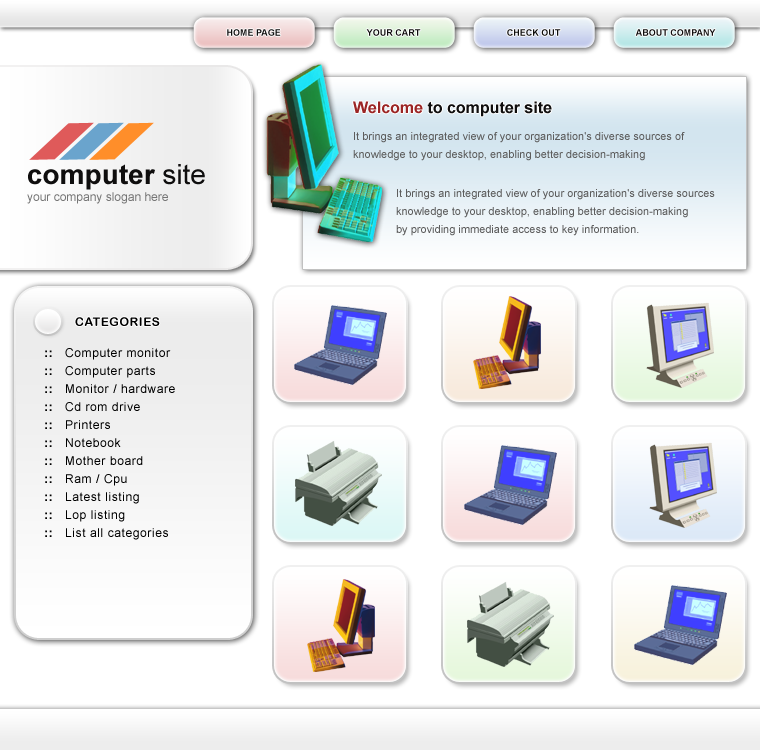
<style>
.page{position:relative;width:760px;height:750px}
.page>*{position:absolute;margin:0}
.t1{font:9px "Arial-BoldMT";color:#0f0e0e}
.t2{font:16px "Arial-BoldMT";color:#0f0e0e}
.t3{font:16px "Arial-BoldMT";color:#9b2525}
.t4{font:11px/18px "ArialMT";color:#5d5d5d}
.t5{font:28px "Arial-BoldMT";color:#0f0e0e}
.t6{font:28px "ArialMT";color:#0f0e0e}
.t7{font:12px "ArialMT";color:#757575}
.t8{font:12px "ArialRoundedMTBold";letter-spacing:0.05em;color:#000000}
.t9{font:12px/18px "ArialMT";letter-spacing:0.05em;color:#000000}
.t10{font:12px/18px "Arial-BoldMT";letter-spacing:0.05em;color:#000000}
</style>
<div class="page">
<p class="t1" style="left:227px;top:29px;width:54px;height:7px">HOME PAGE</p>
<p class="t1" style="left:366px;top:29px;width:55px;height:7px">YOUR CART</p>
<p class="t1" style="left:507px;top:29px;width:54px;height:7px">CHECK OUT</p>
<p class="t1" style="left:635px;top:29px;width:81px;height:7px">ABOUT COMPANY</p>
<p class="t2" style="left:353px;top:101px;width:199px;height:16px"><span class="t3">Welcome</span> to computer site</p>
<p class="t4" style="left:353px;top:132px;width:332px;height:29px">It brings an integrated view of your organization's diverse sources of <br>knowledge to your desktop, enabling better decision-making</p>
<p class="t5" style="left:28px;top:164px;width:177px;height:26px">computer<span class="t6"> site</span></p>
<p class="t7" style="left:27px;top:192px;width:141px;height:12px">your company slogan here</p>
<p class="t4" style="left:396px;top:189px;width:319px;height:47px">It brings an integrated view of your organization's diverse sources<br>knowledge to your desktop, enabling better decision-making <br>by providing immediate access to key information.</p>
<p class="t8" style="left:75px;top:317px;width:85px;height:9px">CATEGORIES</p>
<p class="t9" style="left:45px;top:348px;width:130px;height:192px"><span class="t10">::   </span>Computer monitor<br><span class="t10">:: </span>  Computer parts<br><span class="t10">:: </span>  Monitor / hardware<br><span class="t10">:: </span>  Cd rom drive<br><span class="t10">::</span>   Printers<br><span class="t10">::</span>   Notebook<br><span class="t10">::</span>   Mother board<br><span class="t10">::</span>   Ram / Cpu<br><span class="t10">:: </span>  Latest listing<br><span class="t10">:: </span>  Lop listing<br><span class="t10">:: </span>  List all categories</p>
</div>
